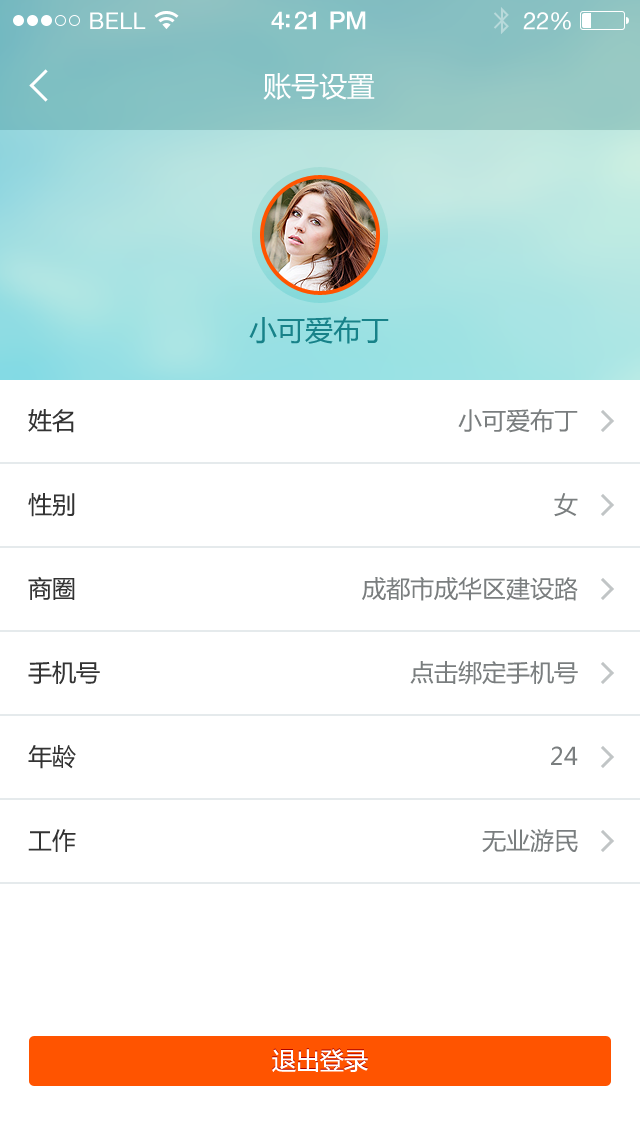
<style>
.page{position:relative;width:640px;height:1136px;background:#ffffff}
.page>*{position:absolute;margin:0}
.t1{font:23px "HelveticaNeue";letter-spacing:0.02em;color:#ffffff}
.t2{font:25px "HelveticaNeue-Medium";letter-spacing:-0.02em;color:#ffffff}
.t3{font:24px "HelveticaNeue";letter-spacing:-0.02em;color:#ffffff}
.t4{font:28px "MicrosoftYaHei";color:#ffffff}
.t5{font:28px "MicrosoftYaHei";color:#188289}
.t6{font:24px "MicrosoftYaHei";color:#333333}
.t7{font:24px "MicrosoftYaHei";color:#7a7e7f}
.t8{font:24px "MicrosoftYaHei";color:#ffffff}
</style>
<div class="page">
<p class="t1" style="left:90px;top:12px;width:56px;height:17px">BELL</p>
<p class="t2" style="left:271px;top:11px;width:95px;height:19px">4:21 PM</p>
<p class="t3" style="left:523px;top:12px;width:48px;height:18px">22%</p>
<p class="t4" style="left:263px;top:73px;width:112px;height:27px">账号设置</p>
<p class="t5" style="left:249px;top:316px;width:140px;height:28px">小可爱布丁</p>
<p class="t6" style="left:28px;top:409px;width:46px;height:24px">姓名</p>
<p class="t7" style="left:458px;top:408px;width:120px;height:25px">小可爱布丁</p>
<p class="t6" style="left:28px;top:493px;width:47px;height:24px">性别</p>
<p class="t7" style="left:554px;top:493px;width:24px;height:24px">女</p>
<p class="t6" style="left:28px;top:576px;width:47px;height:24px">商圈</p>
<p class="t7" style="left:362px;top:576px;width:216px;height:25px">成都市成华区建设路</p>
<p class="t6" style="left:28px;top:661px;width:72px;height:24px">手机号</p>
<p class="t7" style="left:410px;top:661px;width:168px;height:24px">点击绑定手机号</p>
<p class="t6" style="left:28px;top:745px;width:48px;height:24px">年龄</p>
<p class="t7" style="left:551px;top:746px;width:27px;height:19px">24</p>
<p class="t6" style="left:28px;top:829px;width:48px;height:23px">工作</p>
<p class="t7" style="left:482px;top:829px;width:96px;height:24px">无业游民</p>
<p class="t8" style="left:272px;top:1049px;width:96px;height:23px">退出登录</p>
</div>
